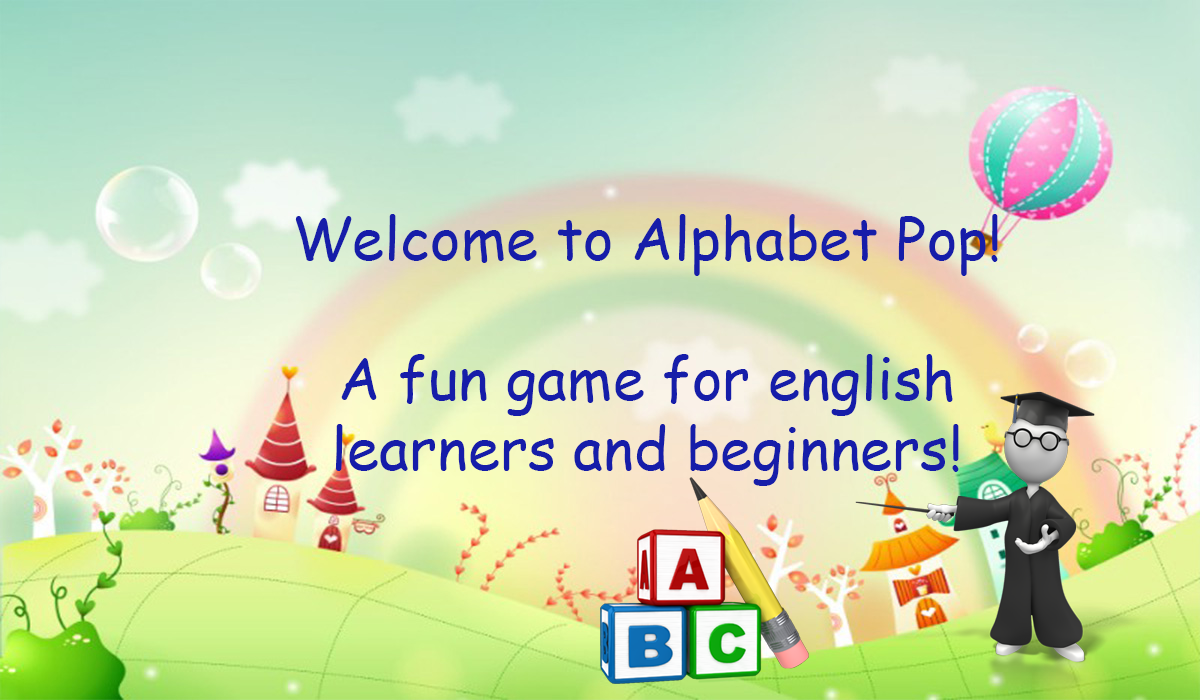
<style>
.page{position:relative;width:1200px;height:700px}
.page>*{position:absolute;margin:0}
.t1{font:58.3px "ComicSansMS";color:#161da9}
</style>
<div class="page">
<p class="t1" style="left:295px;top:214px;width:703px;height:272px;text-align:center">Welcome to Alphabet Pop!<br><br>A fun game for english<br>learners and beginners!</p>
</div>
